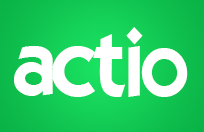
<style>
.page{position:relative;width:204px;height:132px}
.page>*{position:absolute;margin:0}
.t1{font:89px "ELEGANCE";color:#ffffff}
</style>
<div class="page">
<p class="t1" style="left:14px;top:27px;width:174px;height:70px">actio</p>
</div>
